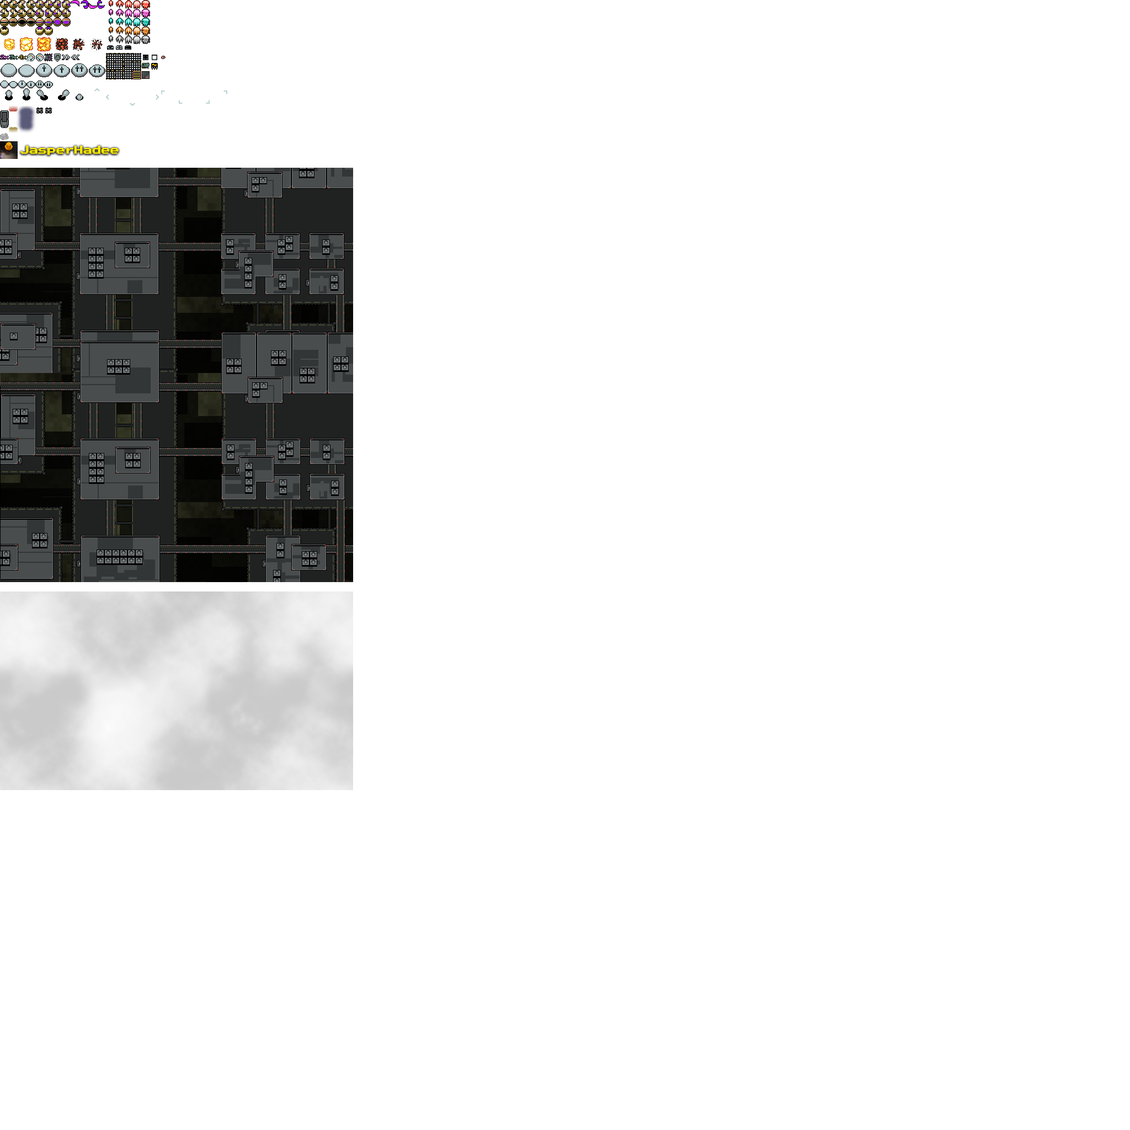
<style>
.page{position:relative;width:1130px;height:1130px;background:#ffffff}
.page>*{position:absolute;margin:0}
.t1{font:9px "PressStart2P-Regular";color:#ffea00}
</style>
<div class="page">
<p class="t1" style="left:20px;top:146px;width:99px;height:9px">JasperHadee</p>
</div>
